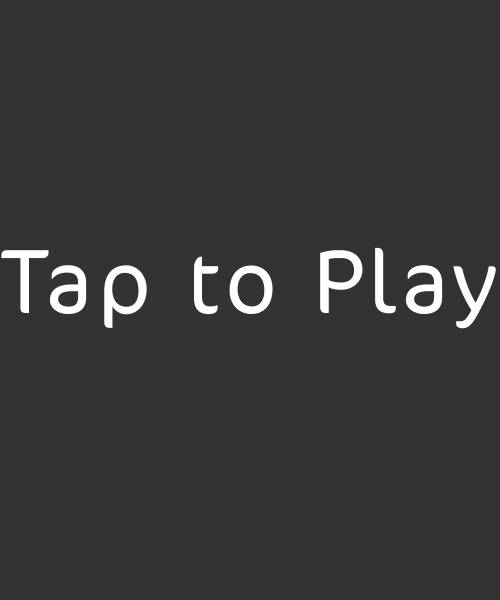
<style>
.page{position:relative;width:500px;height:600px;background:#333333}
.page>*{position:absolute;margin:0}
.t1{font:103px "CoconNextArabic-Light";letter-spacing:0.04em;color:#ffffff}
</style>
<div class="page">
<p class="t1" style="left:1px;top:247px;width:495px;height:82px">Tap to Play</p>
</div>
